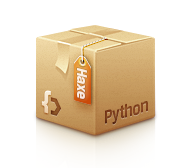
<style>
.page{position:relative;width:192px;height:168px;background:#ffffff}
.page>*{position:absolute;margin:0}
.t1{font:16px "BreuerText-Bold";letter-spacing:-0.01em;color:#faece3;scale:0.96 1}
.t2{font:20px "BreuerText-Bold";letter-spacing:-0.025em;color:#81421f;scale:0.81 1}
</style>
<div class="page">
<p class="t1" style="left:77px;top:68px;width:10px;height:31px;rotate:90deg">Haxe</p>
<p class="t2" style="left:105px;top:101px;width:43px;height:24px;rotate:-16deg">Python</p>
</div>
